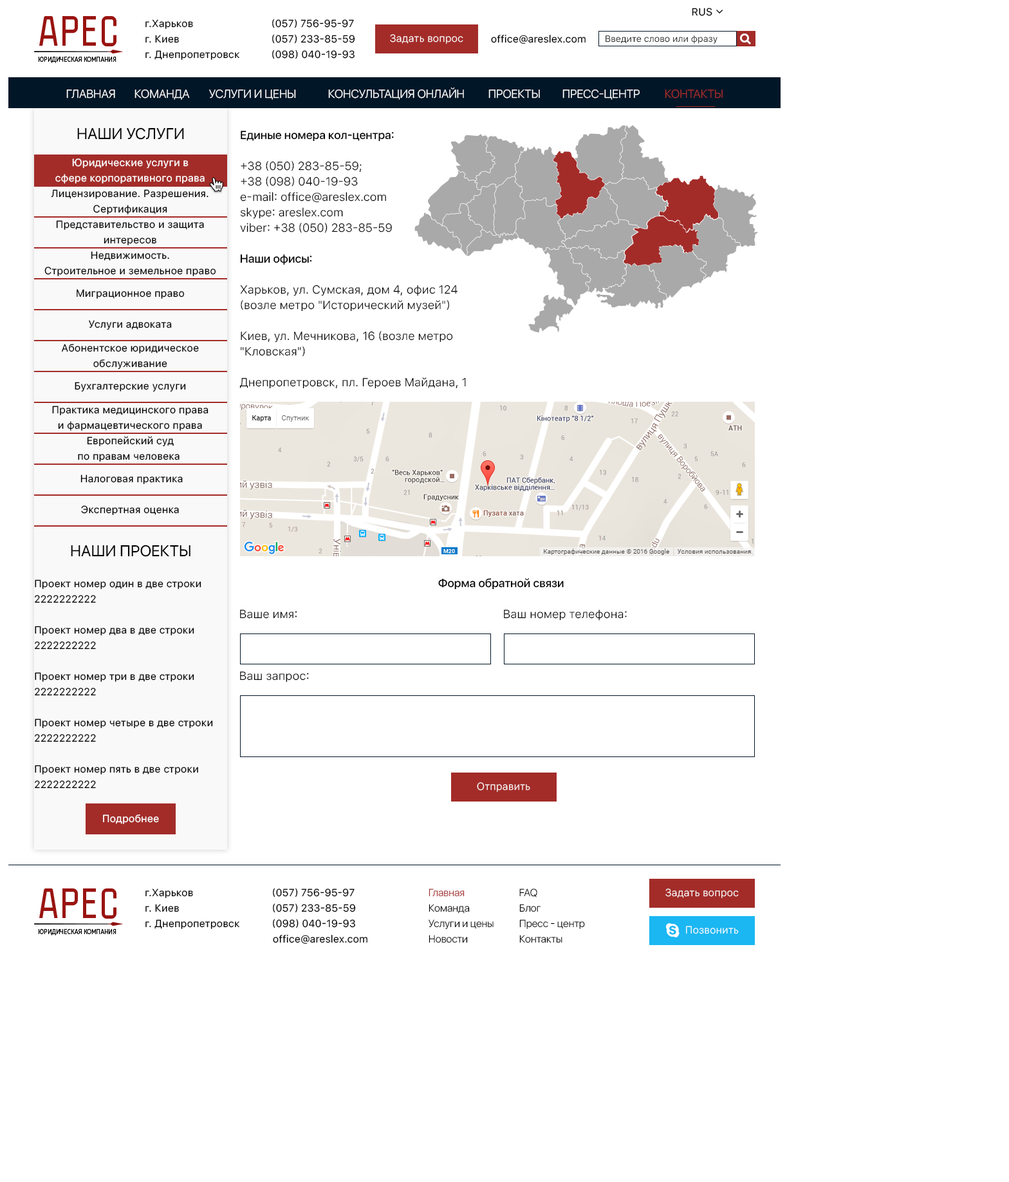
<style>
.page{position:relative;width:1009px;height:1182px;background:#ffffff}
.page>*{position:absolute;margin:0}
.t1{font:10.3px "SFUIText-Regular";color:#000000}
.t2{font:10.3px/15.4px "SFUIText-Regular";color:#000000}
.t3{font:10.3px "SFUIText-Light";color:#ffffff}
.t4{font:9px "SFUIText-Light";color:#000000}
.t5{font:11.6px "SFUIDisplay-Light";color:#ffffff;text-transform:uppercase}
.t6{font:11.6px "SFUIDisplay-Light";color:#a32c29;text-transform:uppercase}
.t7{font:15.4px "SFUIDisplay-Regular";color:#000000;text-transform:uppercase}
.t8{font:11.6px/15.4px "SFUIText-Light";color:#000000}
.t9{font:11.6px/15.4px "SFUIDisplay-Medium";color:#000000}
.t10{font:10.3px/15.4px "SFUIText-Regular";color:#ffffff}
.t11{font:11.6px "SFUIDisplay-Medium";color:#000000}
.t12{font:11.6px "SFUIText-Light";color:#000000}
.t13{font:10.3px "SFUIText-Regular";color:#fffefe}
.t14{font:10.3px/15.4px "SFUIDisplay-Light";color:#000000}
</style>
<div class="page">
<p class="t1" style="left:692px;top:8px;width:20px;height:8px">RUS</p>
<p class="t2" style="left:145px;top:19px;width:94px;height:41px">г.Харьков<br>г. Киев<br>г. Днепропетровск</p>
<p class="t2" style="left:272px;top:19px;width:83px;height:40px">(057) 756-95-97<br>(057) 233-85-59<br>(098) 040-19-93</p>
<p class="t3" style="left:390px;top:34px;width:73px;height:10px">Задать вопрос</p>
<p class="t1" style="left:491px;top:34px;width:95px;height:10px">office@areslex.com</p>
<p class="t4" style="left:606px;top:35px;width:112px;height:9px">Введите слово или фразу</p>
<p class="t5" style="left:66px;top:89px;width:49px;height:9px">Главная</p>
<p class="t5" style="left:135px;top:89px;width:55px;height:11px">Команда</p>
<p class="t5" style="left:209px;top:89px;width:87px;height:11px">Услуги и цены</p>
<p class="t5" style="left:328px;top:87px;width:136px;height:13px">консультация онлайн</p>
<p class="t5" style="left:488px;top:89px;width:52px;height:9px">Проекты</p>
<p class="t5" style="left:562px;top:89px;width:78px;height:11px">Пресс-центр</p>
<p class="t6" style="left:665px;top:89px;width:58px;height:9px">Контакты</p>
<p class="t7" style="left:77px;top:127px;width:107px;height:13px">Наши услуги</p>
<p class="t8" style="left:240px;top:131px;width:154px;height:102px"><span class="t9">Единые номера кол-центра:<br></span><br>+38 (050) 283-85-59;<br>+38 (098) 040-19-93<br>e-mail: office@areslex.com<br>skype: areslex.com<br>viber: +38 (050) 283-85-59</p>
<p class="t10" style="left:55px;top:158px;width:150px;height:25px;text-align:center">Юридические услуги в<br>сфере корпоративного права</p>
<p class="t2" style="left:51px;top:189px;width:158px;height:25px;text-align:center">Лицензирование. Разрешения.<br>Сертификация</p>
<p class="t2" style="left:56px;top:220px;width:148px;height:25px;text-align:center">Представительство и защита<br>интересов</p>
<p class="t2" style="left:44px;top:251px;width:172px;height:25px;text-align:center">Недвижимость.<br>Строительное и земельное право</p>
<p class="t8" style="left:239px;top:254px;width:227px;height:135px"><span class="t9">Наши офисы:<br></span><br>Харьков, ул. Сумская, дом 4, офис 124 (возле метро "Исторический музей")<br><br>Киев, ул. Мечникова, 16 (возле метро "Кловская")<br><br>Днепропетровск, пл. Героев Майдана, 1</p>
<p class="t1" style="left:77px;top:289px;width:108px;height:10px">Миграционное право</p>
<p class="t1" style="left:89px;top:320px;width:83px;height:10px">Услуги адвоката</p>
<p class="t2" style="left:61px;top:344px;width:138px;height:25px;text-align:center">Абонентское юридическое<br>обслуживание</p>
<p class="t1" style="left:75px;top:382px;width:111px;height:10px">Бухгалтерские услуги</p>
<p class="t2" style="left:52px;top:405px;width:157px;height:26px;text-align:center">Практика медицинского права<br>и фармацевтического права</p>
<p class="t2" style="left:78px;top:436px;width:102px;height:25px;text-align:center">Европейский суд<br>по правам человека</p>
<p class="t1" style="left:80px;top:474px;width:103px;height:10px">Налоговая практика</p>
<p class="t1" style="left:81px;top:505px;width:98px;height:10px">Экспертная оценка</p>
<p class="t7" style="left:71px;top:544px;width:120px;height:13px">Наши проекты</p>
<p class="t2" style="left:35px;top:579px;width:166px;height:24px">Проект номер один в две строки 2222222222</p>
<p class="t11" style="left:438px;top:578px;width:126px;height:12px">Форма обратной связи</p>
<p class="t12" style="left:240px;top:609px;width:57px;height:9px">Ваше имя:</p>
<p class="t12" style="left:504px;top:609px;width:123px;height:11px">Ваш номер телефона:</p>
<p class="t2" style="left:35px;top:626px;width:159px;height:23px">Проект номер два в две строки 2222222222</p>
<p class="t2" style="left:35px;top:672px;width:159px;height:24px">Проект номер три в две строки 2222222222</p>
<p class="t12" style="left:240px;top:671px;width:69px;height:11px">Ваш запрос:</p>
<p class="t2" style="left:35px;top:718px;width:178px;height:24px">Проект номер четыре в две строки 2222222222</p>
<p class="t2" style="left:35px;top:765px;width:163px;height:23px">Проект номер пять в две строки 2222222222</p>
<p class="t3" style="left:477px;top:782px;width:53px;height:10px">Отправить</p>
<p class="t13" style="left:103px;top:814px;width:56px;height:10px">Подробнее</p>
<p class="t2" style="left:145px;top:888px;width:94px;height:41px">г.Харьков<br>г. Киев<br>г. Днепропетровск</p>
<p class="t2" style="left:273px;top:888px;width:83px;height:40px">(057) 756-95-97<br>(057) 233-85-59<br>(098) 040-19-93</p>
<p class="t14" style="left:429px;top:888px;width:65px;height:55px">Главная<br>Команда<br>Услуги и цены<br>Новости</p>
<p class="t14" style="left:519px;top:888px;width:66px;height:55px">FAQ<br>Блог<br>Пресс - центр<br>Контакты</p>
<p class="t3" style="left:665px;top:888px;width:74px;height:10px">Задать вопрос</p>
<p class="t3" style="left:686px;top:925px;width:53px;height:9px">Позвонить</p>
<p class="t1" style="left:273px;top:934px;width:94px;height:9px">office@areslex.com</p>
</div>
